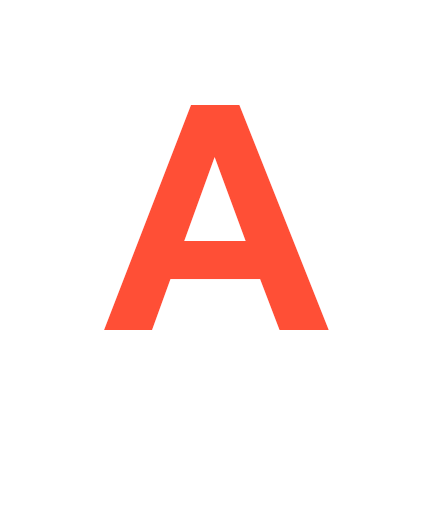
<style>
.page{position:relative;width:432px;height:508px;background:#ffffff}
.page>*{position:absolute;margin:0}
.t1{font:314.3px "Arial-BoldMT";color:#ff4f36}
</style>
<div class="page">
<p class="t1" style="left:104px;top:105px;width:225px;height:225px">A</p>
</div>
